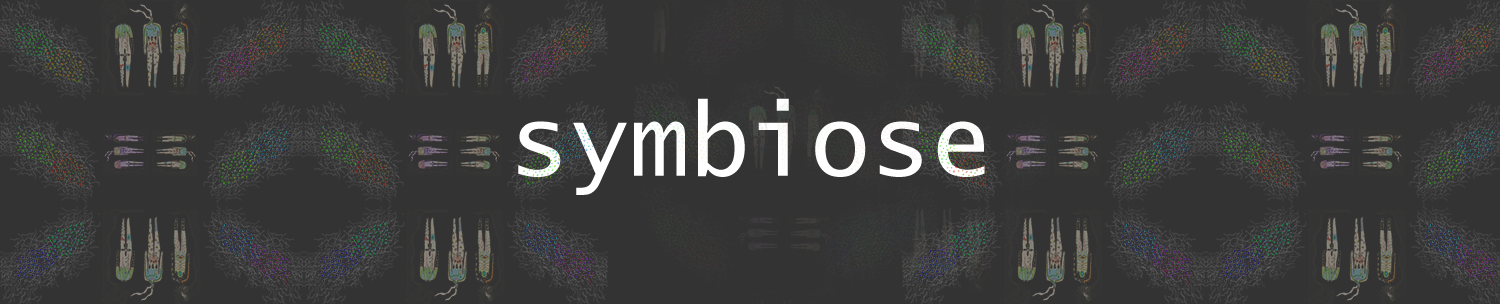
<style>
.page{position:relative;width:1500px;height:304px;background:#333333}
.page>*{position:absolute;margin:0}
.t1{font:100px "LucidaSans-Typewriter";color:#ffffff}
</style>
<div class="page">
<p class="t1" style="left:518px;top:98px;width:467px;height:97px">symbiose</p>
</div>
